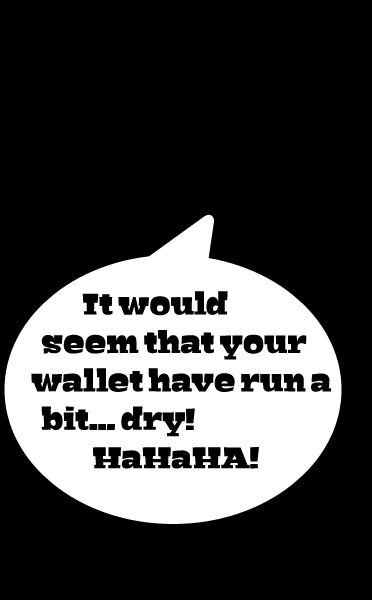
<style>
.page{position:relative;width:372px;height:600px;background:#000000}
.page>*{position:absolute;margin:0}
.t1{font:32px "Bigfish-Black";color:#000000}
</style>
<div class="page">
<p class="t1" style="left:31px;top:291px;width:300px;height:178px">It would <br>  seem that your   wallet have run a  <br>  bit... dry! <br>            HaHaHA!</p>
</div>
